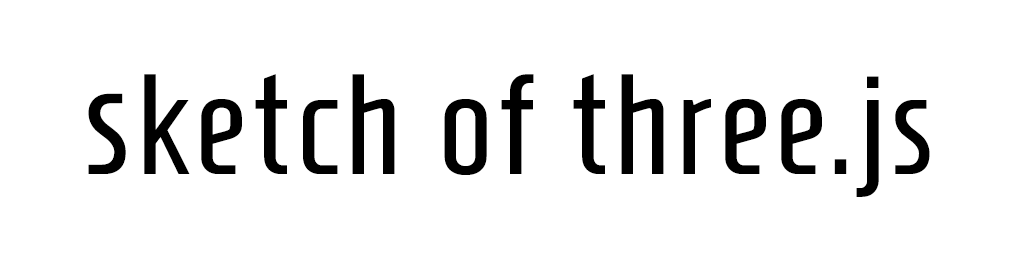
<style>
.page{position:relative;width:1024px;height:256px;background:#ffffff}
.page>*{position:absolute;margin:0}
.t1{font:34.1px "Homenaje-Regular";letter-spacing:0.05em;color:#000000}
.t2{font:154px "Homenaje-Regular";letter-spacing:0.05em;color:#000000}
</style>
<div class="page">
<p class="t1" style="left:88px;top:74px;width:842px;height:123px"><span class="t2">s</span>ketch of three.js</p>
</div>
